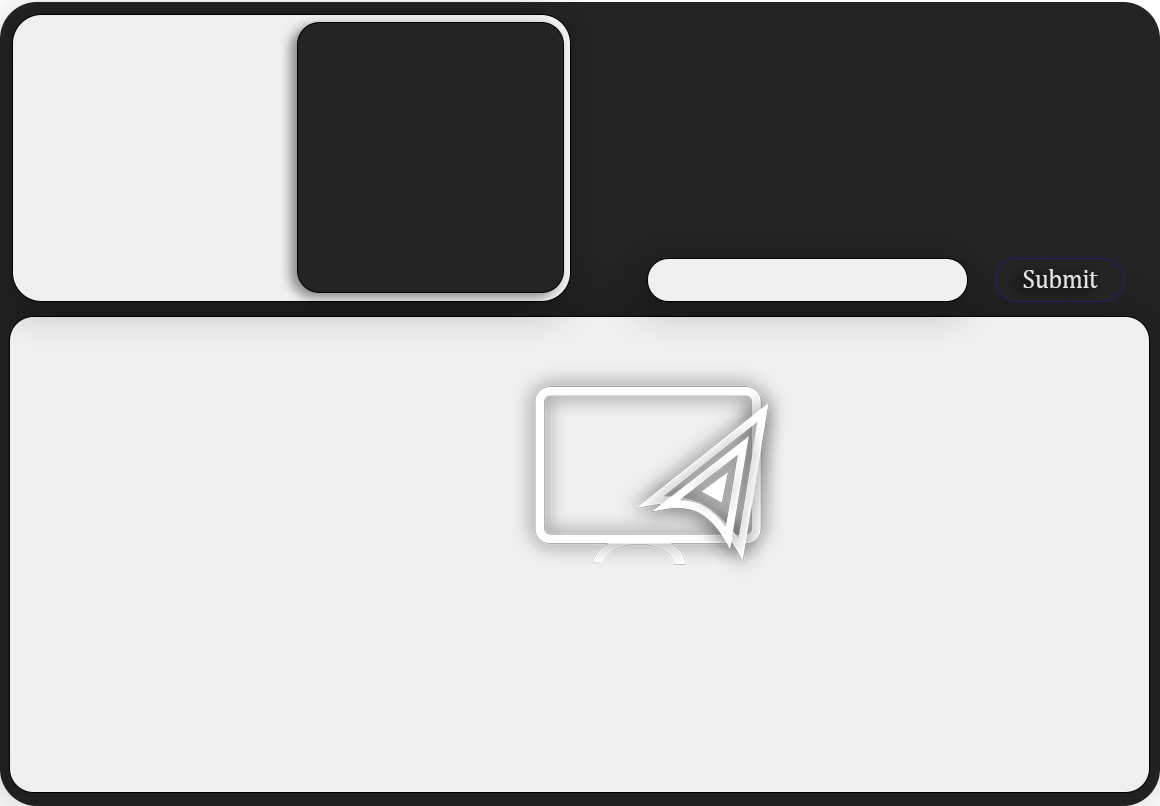
<style>
.page{position:relative;width:1160px;height:806px;background:#f0f0f0}
.page>*{position:absolute;margin:0}
.t1{font:26.9px "CambriaMath";color:#e3e3e3;scale:0.91 1}
</style>
<div class="page">
<p class="t1" style="left:1023px;top:269px;width:75px;height:19px">Submit</p>
</div>
